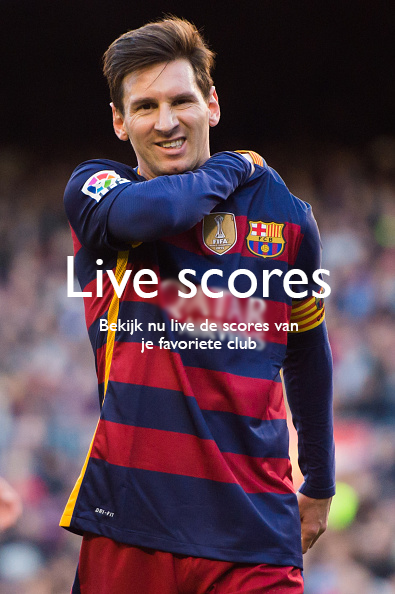
<style>
.page{position:relative;width:395px;height:594px}
.page>*{position:absolute;margin:0}
.t1{font:60px "GillSansMT";color:#ffffff}
.t2{font:18px/18px "GillSansMT";color:#ffffff}
</style>
<div class="page">
<p class="t1" style="left:67px;top:256px;width:264px;height:42px">Live scores</p>
<p class="t2" style="left:100px;top:319px;width:198px;height:34px;text-align:center">Bekijk nu live de scores van je favoriete club</p>
</div>
